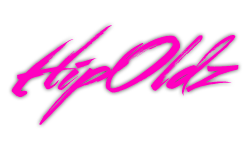
<style>
.page{position:relative;width:250px;height:150px;background:#ffffff}
.page>*{position:absolute;margin:0}
.t1{font:72px "Mustang";color:#ff00c0}
</style>
<div class="page">
<p class="t1" style="left:11px;top:25px;width:228px;height:100px">HipOldz</p>
</div>
